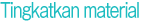
<style>
.page{position:relative;width:142px;height:21px;background:#ffffff}
.page>*{position:absolute;margin:0}
.t1{font:20px "GothicMB101Pro-Regular";letter-spacing:-0.06em;color:#1dbcc0;scale:0.79 1}
</style>
<div class="page">
<p class="t1" style="left:0px;top:2px;width:139px;height:19px">Tingkatkan material</p>
</div>
